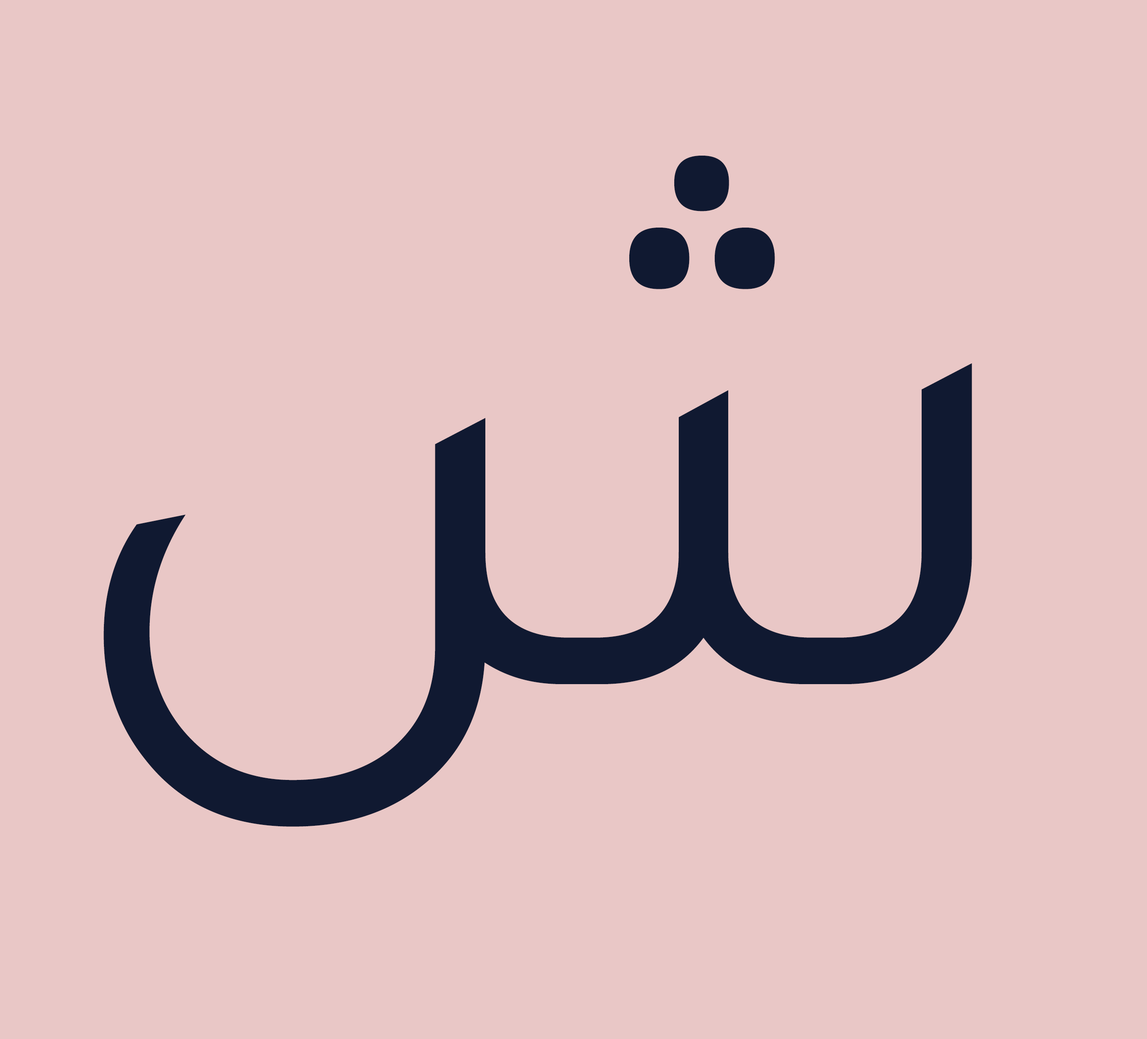
<style>
.page{position:relative;width:1147px;height:1039px;background:#e9c7c6}
.page>*{position:absolute;margin:0}
.t1{font:749.9px "Tajawal-Regular";color:#101931}
</style>
<div class="page">
<p class="t1" style="left:103px;top:156px;width:869px;height:671px">ش</p>
</div>
